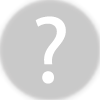
<style>
.page{position:relative;width:100px;height:100px;background:#c9c9c9}
.page>*{position:absolute;margin:0}
.t1{font:96px "MyriadPro-Regular";color:#ffffff}
</style>
<div class="page">
<p class="t1" style="left:35px;top:16px;width:31px;height:68px">?</p>
</div>
